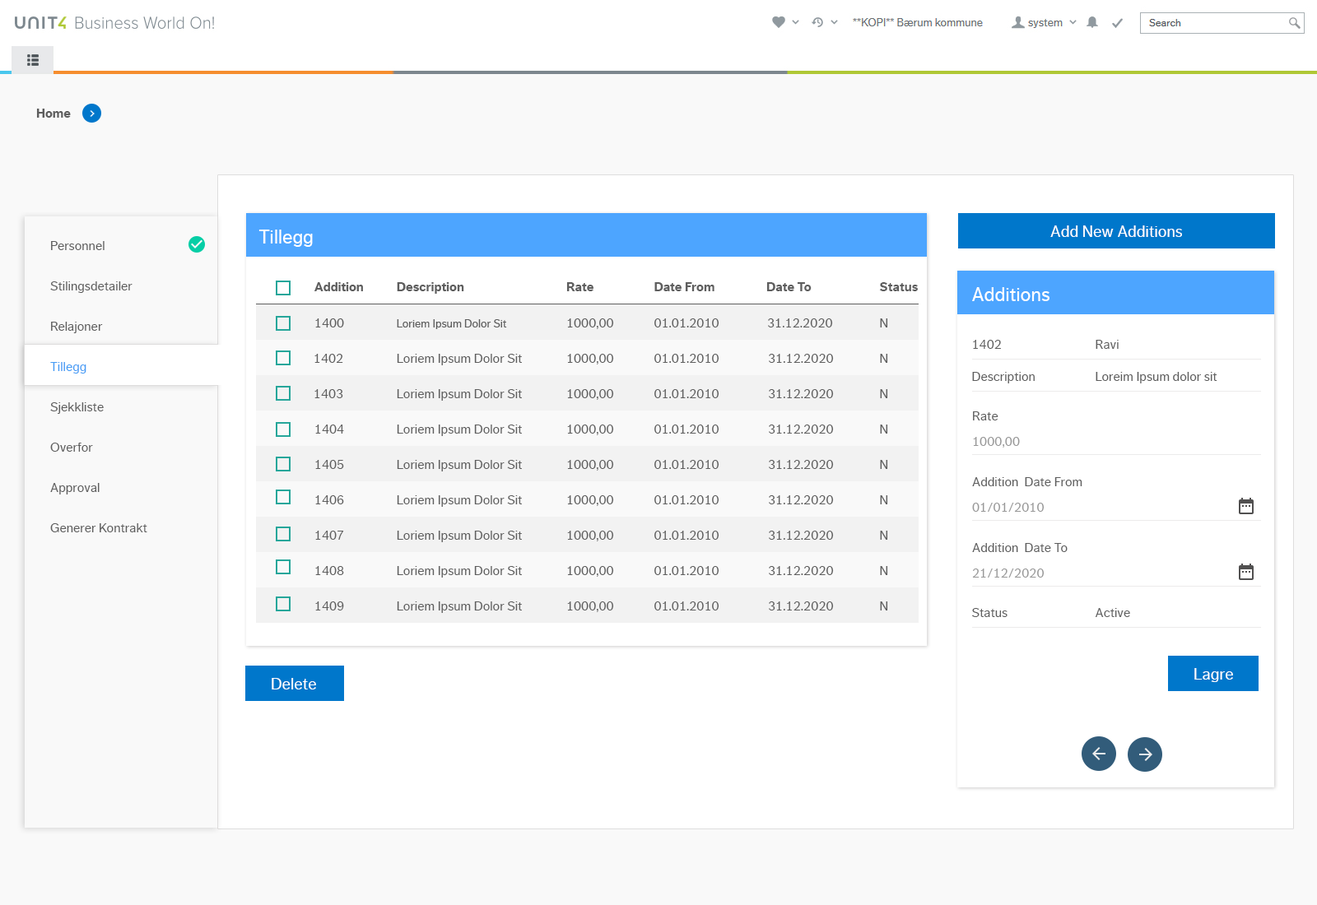
<style>
.page{position:relative;width:1317px;height:905px;background:#ffffff}
.page>*{position:absolute;margin:0}
.t1{font:13.2px "DagnyCompPro-Bold";color:#5e5e5e}
.t2{font:19.8px "DagnyCompPro";color:#ffffff}
.t3{font:16.5px "DagnyCompPro";color:#ffffff}
.t4{font:13.2px/40.3px "DagnyCompPro";color:#5e5e5e}
.t5{font:13.2px/40.3px "DagnyCompPro";color:#449cf5}
.t6{font:13.2px "DagnyCompPro";color:#5e5e5e}
.t7{font:11.5px "DagnyCompPro";color:#5e5e5e}
.t8{font:13.2px "DagnyCompPro";color:#989898}
</style>
<div class="page">
<p class="t1" style="left:36px;top:109px;width:35px;height:9px">Home</p>
<p class="t2" style="left:258px;top:230px;width:55px;height:17px">Tillegg</p>
<p class="t3" style="left:1050px;top:226px;width:132px;height:11px">Add New Additions</p>
<p class="t4" style="left:50px;top:241px;width:97px;height:292px">Personnel<br>Stilingsdetailer<br>Relajoner<br><span class="t5">Tillegg </span> <br>Sjekkliste<br>Overfor<br>Approval<br>Generer Kontrakt</p>
<p class="t1" style="left:314px;top:282px;width:49px;height:9px">Addition</p>
<p class="t1" style="left:397px;top:282px;width:67px;height:12px">Description</p>
<p class="t1" style="left:566px;top:282px;width:27px;height:9px">Rate</p>
<p class="t1" style="left:654px;top:282px;width:60px;height:9px">Date From</p>
<p class="t1" style="left:766px;top:282px;width:46px;height:9px">Date To</p>
<p class="t1" style="left:879px;top:282px;width:39px;height:9px">Status</p>
<p class="t2" style="left:972px;top:287px;width:77px;height:14px">Additions</p>
<p class="t6" style="left:315px;top:319px;width:29px;height:9px">1400</p>
<p class="t7" style="left:397px;top:319px;width:110px;height:10px">Loriem Ipsum Dolor Sit</p>
<p class="t6" style="left:567px;top:319px;width:47px;height:10px">1000,00</p>
<p class="t6" style="left:654px;top:319px;width:65px;height:9px">01.01.2010</p>
<p class="t6" style="left:768px;top:319px;width:65px;height:9px">31.12.2020</p>
<p class="t6" style="left:880px;top:319px;width:8px;height:9px">N</p>
<p class="t6" style="left:972px;top:340px;width:63px;height:44px">1402<br>Description</p>
<p class="t6" style="left:1096px;top:340px;width:121px;height:44px">Ravi<br>Loreim Ipsum dolor sit</p>
<p class="t6" style="left:314px;top:354px;width:29px;height:9px">1402</p>
<p class="t6" style="left:397px;top:354px;width:125px;height:11px">Loriem Ipsum Dolor Sit</p>
<p class="t6" style="left:567px;top:354px;width:47px;height:11px">1000,00</p>
<p class="t6" style="left:654px;top:354px;width:65px;height:9px">01.01.2010</p>
<p class="t6" style="left:769px;top:354px;width:65px;height:9px">31.12.2020</p>
<p class="t6" style="left:880px;top:354px;width:8px;height:9px">N</p>
<p class="t6" style="left:314px;top:389px;width:29px;height:9px">1403</p>
<p class="t6" style="left:397px;top:389px;width:125px;height:12px">Loriem Ipsum Dolor Sit</p>
<p class="t6" style="left:567px;top:389px;width:47px;height:11px">1000,00</p>
<p class="t6" style="left:654px;top:389px;width:65px;height:9px">01.01.2010</p>
<p class="t6" style="left:769px;top:389px;width:65px;height:9px">31.12.2020</p>
<p class="t6" style="left:880px;top:389px;width:8px;height:9px">N</p>
<p class="t6" style="left:973px;top:412px;width:25px;height:9px">Rate</p>
<p class="t6" style="left:315px;top:425px;width:29px;height:9px">1404</p>
<p class="t6" style="left:397px;top:425px;width:125px;height:11px">Loriem Ipsum Dolor Sit</p>
<p class="t6" style="left:567px;top:425px;width:47px;height:10px">1000,00</p>
<p class="t6" style="left:654px;top:425px;width:65px;height:9px">01.01.2010</p>
<p class="t6" style="left:769px;top:425px;width:65px;height:9px">31.12.2020</p>
<p class="t6" style="left:880px;top:425px;width:8px;height:9px">N</p>
<p class="t8" style="left:973px;top:437px;width:47px;height:11px">1000,00</p>
<p class="t6" style="left:315px;top:460px;width:29px;height:9px">1405</p>
<p class="t6" style="left:397px;top:460px;width:125px;height:12px">Loriem Ipsum Dolor Sit</p>
<p class="t6" style="left:567px;top:460px;width:47px;height:11px">1000,00</p>
<p class="t6" style="left:654px;top:460px;width:65px;height:9px">01.01.2010</p>
<p class="t6" style="left:769px;top:460px;width:65px;height:9px">31.12.2020</p>
<p class="t6" style="left:880px;top:460px;width:8px;height:9px">N</p>
<p class="t6" style="left:972px;top:477px;width:110px;height:9px">Addition  Date From</p>
<p class="t6" style="left:315px;top:496px;width:29px;height:9px">1406</p>
<p class="t6" style="left:397px;top:496px;width:125px;height:11px">Loriem Ipsum Dolor Sit</p>
<p class="t6" style="left:567px;top:496px;width:47px;height:10px">1000,00</p>
<p class="t6" style="left:654px;top:496px;width:65px;height:9px">01.01.2010</p>
<p class="t6" style="left:769px;top:496px;width:65px;height:9px">31.12.2020</p>
<p class="t6" style="left:880px;top:496px;width:8px;height:9px">N</p>
<p class="t8" style="left:972px;top:503px;width:73px;height:9px">01/01/2010</p>
<p class="t6" style="left:315px;top:531px;width:29px;height:9px">1407</p>
<p class="t6" style="left:397px;top:531px;width:125px;height:11px">Loriem Ipsum Dolor Sit</p>
<p class="t6" style="left:567px;top:531px;width:47px;height:11px">1000,00</p>
<p class="t6" style="left:654px;top:531px;width:65px;height:9px">01.01.2010</p>
<p class="t6" style="left:769px;top:531px;width:65px;height:9px">31.12.2020</p>
<p class="t6" style="left:880px;top:531px;width:8px;height:9px">N</p>
<p class="t6" style="left:972px;top:543px;width:96px;height:9px">Addition  Date To</p>
<p class="t6" style="left:315px;top:566px;width:29px;height:9px">1408</p>
<p class="t6" style="left:397px;top:566px;width:125px;height:12px">Loriem Ipsum Dolor Sit</p>
<p class="t6" style="left:567px;top:566px;width:47px;height:11px">1000,00</p>
<p class="t6" style="left:654px;top:566px;width:65px;height:9px">01.01.2010</p>
<p class="t6" style="left:769px;top:566px;width:65px;height:9px">31.12.2020</p>
<p class="t6" style="left:880px;top:566px;width:8px;height:9px">N</p>
<p class="t8" style="left:972px;top:569px;width:73px;height:9px">21/12/2020</p>
<p class="t6" style="left:315px;top:602px;width:29px;height:9px">1409</p>
<p class="t6" style="left:397px;top:602px;width:125px;height:11px">Loriem Ipsum Dolor Sit</p>
<p class="t6" style="left:567px;top:602px;width:47px;height:10px">1000,00</p>
<p class="t6" style="left:654px;top:602px;width:65px;height:9px">01.01.2010</p>
<p class="t6" style="left:769px;top:602px;width:65px;height:9px">31.12.2020</p>
<p class="t6" style="left:880px;top:602px;width:8px;height:9px">N</p>
<p class="t6" style="left:972px;top:608px;width:35px;height:9px">Status</p>
<p class="t6" style="left:1095px;top:608px;width:35px;height:9px">Active</p>
<p class="t3" style="left:1194px;top:668px;width:39px;height:14px">Lagre</p>
<p class="t3" style="left:272px;top:678px;width:44px;height:12px">Delete</p>
</div>
